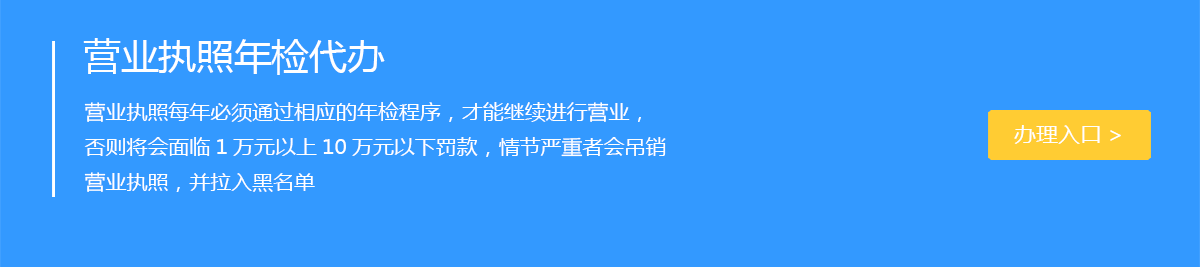
<style>
.page{position:relative;width:1200px;height:267px;background:#3399ff}
.page>*{position:absolute;margin:0}
.t1{font:36px "MicrosoftYaHei";color:#ffffff;scale:1.05 1}
.t2{font:20px "MicrosoftYaHei";color:#ffffff;scale:1.05 1}
.t3{font:21px "MicrosoftYaHei";color:#ffffff;scale:1.05 1}
</style>
<div class="page">
<p class="t1" style="left:83px;top:38px;width:302px;height:37px">营业执照年检代办</p>
<p class="t2" style="left:84px;top:102px;width:582px;height:90px">营业执照每年必须通过相应的年检程序，才能继续进行营业，<br>否则将会面临1万元以上10万元以下罚款，情节严重者会吊销<br>营业执照，并拉入黑名单</p>
<p class="t3" style="left:1014px;top:125px;width:107px;height:19px">办理入口&gt;</p>
</div>
